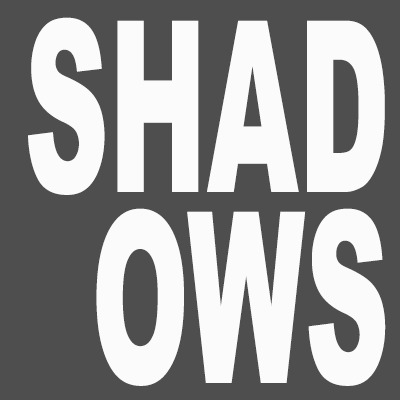
<style>
.page{position:relative;width:400px;height:400px;background:#4e4e4e}
.page>*{position:absolute;margin:0}
.t1{font:238.7px/191px "Arial-Black";color:#fcfbfb;scale:0.49 1}
</style>
<div class="page">
<p class="t1" style="left:28px;top:17px;width:358px;height:369px;text-align:right">SHAD<br>OWS</p>
</div>
